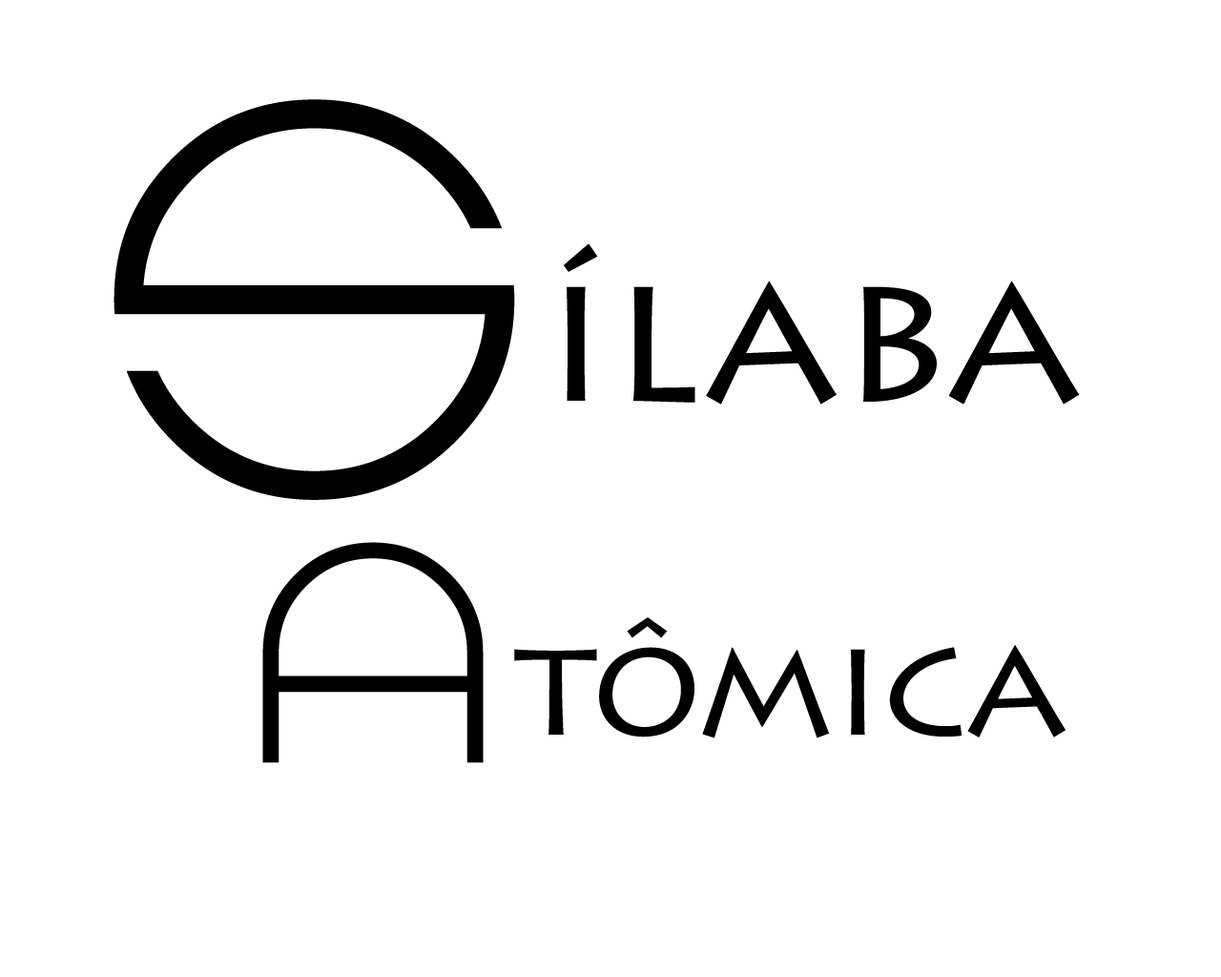
<style>
.page{position:relative;width:1221px;height:977px;background:#ffffff}
.page>*{position:absolute;margin:0}
.t1{font:585.1px "ZdykLibra";color:#000000}
.t2{font:190.8px "LithosPro-Regular";color:#000000}
.t3{font:321.8px "ZdykLibra";color:#000000}
.t4{font:143.1px "LithosPro-Regular";color:#000000}
</style>
<div class="page">
<p class="t1" style="left:114px;top:99px;width:401px;height:401px">S</p>
<p class="t2" style="left:564px;top:243px;width:516px;height:161px">ílaba</p>
<p class="t3" style="left:262px;top:542px;width:222px;height:221px">A</p>
<p class="t4" style="left:514px;top:617px;width:551px;height:121px">tômica</p>
</div>
